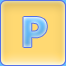
<style>
.page{position:relative;width:66px;height:66px}
.page>*{position:absolute;margin:0}
.t1{font:41px "Tahoma-Bold"}
</style>
<div class="page">
<p class="t1" style="left:23px;top:17px;width:24px;height:30px">Р</p>
<p class="t1" style="left:23px;top:17px;width:24px;height:30px">Р</p>
</div>
